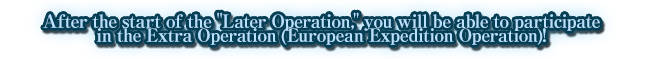
<style>
.page{position:relative;width:646px;height:59px;background:#053f55}
.page>*{position:absolute;margin:0}
.t1{font:18px/14px "RyuminPro-ExBold";letter-spacing:-0.04em;color:#b9e0ff}
</style>
<div class="page">
<p class="t1" style="left:43px;top:12px;width:557px;height:33px;text-align:center">After the start of the "Later Operation," you will be able to participate<br>in the Extra Operation (European Expedition Operation)!</p>
</div>
